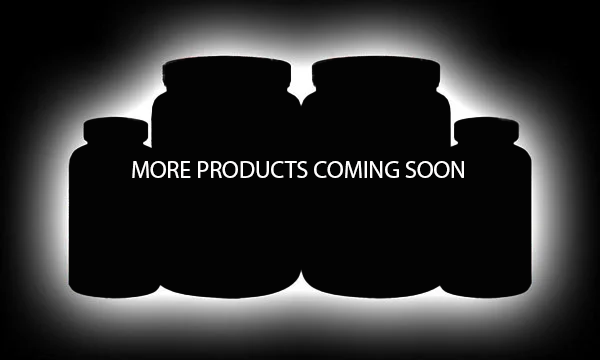
<style>
.page{position:relative;width:600px;height:360px;background:#030303}
.page>*{position:absolute;margin:0}
.t1{font:24px "MyriadPro-Regular";color:#fffefe}
</style>
<div class="page">
<p class="t1" style="left:132px;top:161px;width:332px;height:17px">MORE PRODUCTS COMING SOON</p>
</div>
